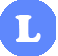
<style>
.page{position:relative;width:58px;height:56px;background:#5f88fc}
.page>*{position:absolute;margin:0}
.t1{font:40px "CooperBlack";color:#ffffff}
</style>
<div class="page">
<p class="t1" style="left:15px;top:15px;width:26px;height:27px">L</p>
</div>
